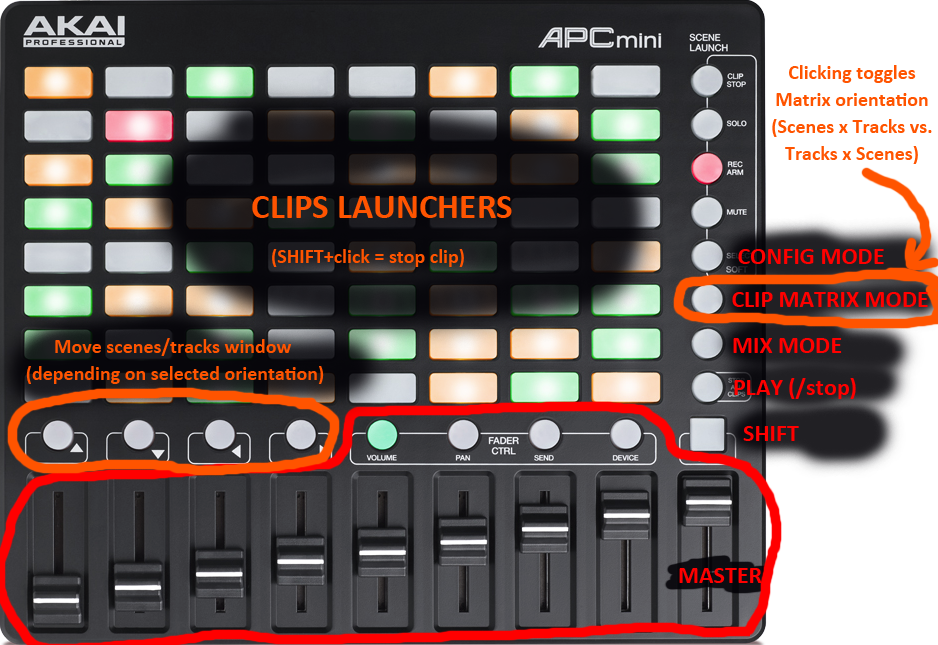
<style>
.page{position:relative;width:938px;height:645px}
.page>*{position:absolute;margin:0}
.t1{font:20px/27px "Calibri-Bold";color:#ff5400}
.t2{font:35px "Calibri-Bold";color:#ff5400}
.t3{font:20px "Calibri-Bold";color:#ff5400}
.t4{font:24px "Calibri-Bold";color:#ff0000}
</style>
<div class="page">
<p class="t1" style="left:772px;top:65px;width:160px;height:99px;text-align:center">Clicking toggles<br>Matrix orientation<br>(Scenes x Tracks vs.<br>Tracks x Scenes)</p>
<p class="t2" style="left:252px;top:196px;width:260px;height:22px">CLIPS LAUNCHERS</p>
<p class="t3" style="left:272px;top:249px;width:192px;height:18px">(SHIFT+click = stop clip)</p>
<p class="t4" style="left:738px;top:249px;width:146px;height:15px">CONFIG MODE</p>
<p class="t4" style="left:732px;top:292px;width:196px;height:15px">CLIP MATRIX MODE</p>
<p class="t1" style="left:26px;top:338px;width:298px;height:46px;text-align:center">Move scenes/tracks window <br>(depending on selected orientation)</p>
<p class="t4" style="left:733px;top:338px;width:109px;height:15px">MIX MODE</p>
<p class="t4" style="left:734px;top:378px;width:122px;height:21px">PLAY (/stop)</p>
<p class="t4" style="left:743px;top:426px;width:56px;height:15px">SHIFT</p>
<p class="t4" style="left:679px;top:568px;width:83px;height:15px">MASTER</p>
</div>
